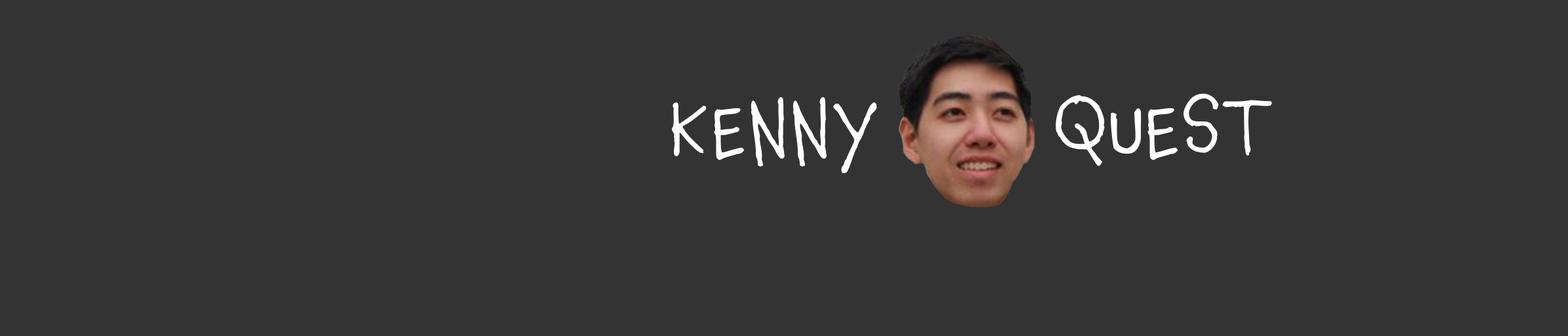
<style>
.page{position:relative;width:1568px;height:336px;background:#333333}
.page>*{position:absolute;margin:0}
.t1{font:91.8px "ChauncyPro-Regular";color:#ffffff}
</style>
<div class="page">
<p class="t1" style="left:672px;top:97px;width:205px;height:76px">KENNY</p>
<p class="t1" style="left:1056px;top:93px;width:216px;height:73px">QUEST</p>
</div>
